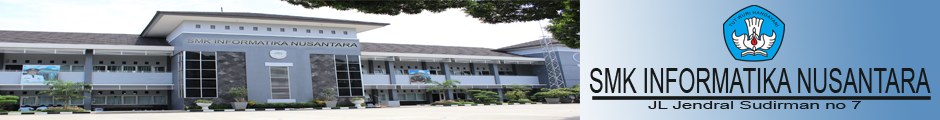
<style>
.page{position:relative;width:940px;height:120px}
.page>*{position:absolute;margin:0}
.t1{font:34.2px "ArialMT";color:#161817;scale:0.64 1}
.t2{font:11px "ArialMT";color:#161817;scale:1.71 1}
</style>
<div class="page">
<p class="t1" style="left:589px;top:68px;width:342px;height:25px">SMK INFORMATIKA NUSANTARA</p>
<p class="t2" style="left:648px;top:101px;width:213px;height:8px">JL Jendral Sudirman no 7</p>
</div>
